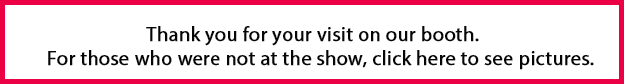
<style>
.page{position:relative;width:624px;height:84px;background:#ffffff}
.page>*{position:absolute;margin:0}
.t1{font:20px "MyriadPro-Regular";color:#070606;font-weight:bold}
</style>
<div class="page">
<p class="t1" style="left:48px;top:26px;width:546px;height:44px">Thank you for your visit on our booth.<br>For those who were not at the show, click here to see pictures.</p>
</div>
